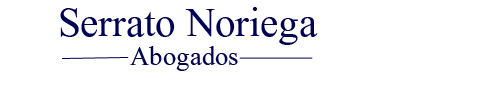
<style>
.page{position:relative;width:500px;height:85px;background:#ffffff}
.page>*{position:absolute;margin:0}
.t1{font:50.7px "Aparajita";color:#000054}
.t2{font:33.3px "Aparajita";color:#000054}
</style>
<div class="page">
<p class="t1" style="left:60px;top:7px;width:258px;height:38px">Serrato Noriega</p>
<p class="t2" style="left:130px;top:46px;width:108px;height:25px">Abogados</p>
</div>
